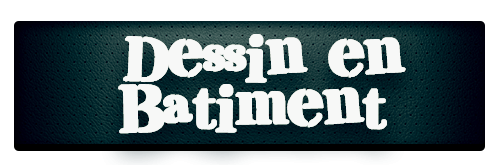
<style>
.page{position:relative;width:500px;height:165px;background:#ffffff}
.page>*{position:absolute;margin:0}
.t1{font:68.7px/50px "VisualMagnets";color:#f7f8f7;font-weight:bold}
</style>
<div class="page">
<p class="t1" style="left:118px;top:34px;width:288px;height:100px;text-align:center">Dessin en <br>Batiment</p>
<p class="t1" style="left:118px;top:34px;width:288px;height:100px;text-align:center">Dessin en <br>Batiment</p>
<p class="t1" style="left:118px;top:34px;width:288px;height:100px;text-align:center">Dessin en <br>Batiment</p>
</div>
